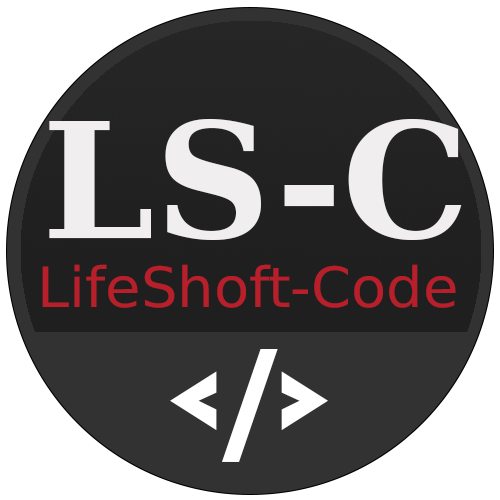
<style>
.page{position:relative;width:500px;height:500px;background:#ffffff}
.page>*{position:absolute;margin:0}
.t1{font:160px "DejaVuSerif-Bold";color:#f0eeee}
.t2{font:55.6px "DejaVuSansCondensed";color:#b71f2b;scale:1.15 1}
.t3{font:133.3px "Bahnschrift-Bold";color:#ffffff}
</style>
<div class="page">
<p class="t1" style="left:49px;top:119px;width:413px;height:121px">LS-C</p>
<p class="t2" style="left:42px;top:264px;width:414px;height:44px">LifeShoft-Code</p>
<p class="t3" style="left:170px;top:338px;width:158px;height:124px">&lt;/&gt;</p>
</div>
